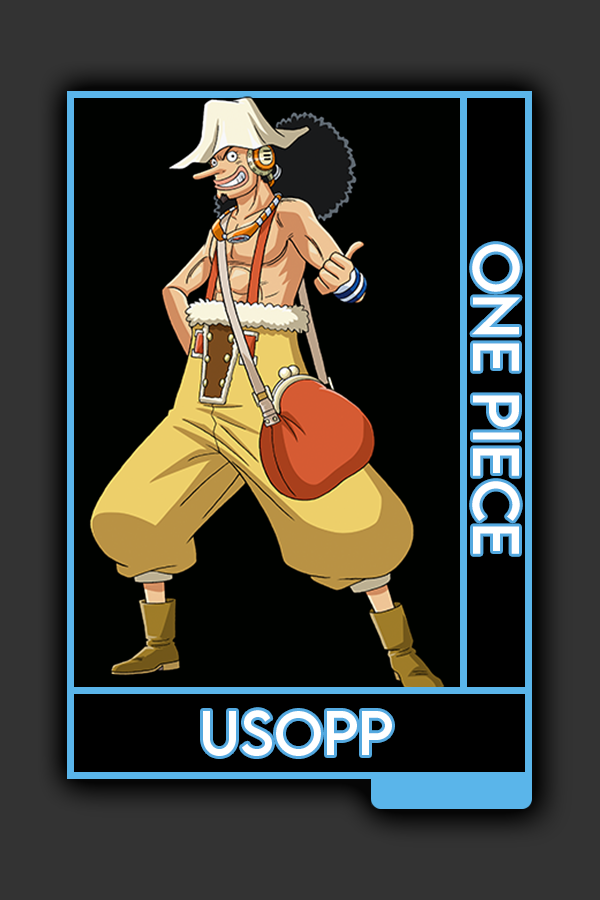
<style>
.page{position:relative;width:600px;height:900px;background:#000200}
.page>*{position:absolute;margin:0}
.t1{font:58.4px "LEMONMILK-Regular";color:#ffffff}
.t2{font:55.4px "LEMONMILK-Regular";color:#ffffff}
</style>
<div class="page">
<p class="t1" style="left:472px;top:244px;width:48px;height:310px;rotate:90deg">One Piece</p>
<p class="t2" style="left:203px;top:710px;width:189px;height:46px">Usopp</p>
</div>
